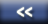
<style>
.page{position:relative;width:48px;height:24px}
.page>*{position:absolute;margin:0}
.t1{font:18px "MyriadPro-Bold";color:#ffffff;scale:0.76 1}
</style>
<div class="page">
<p class="t1" style="left:17px;top:7px;width:15px;height:10px">&lt;&lt;</p>
</div>
